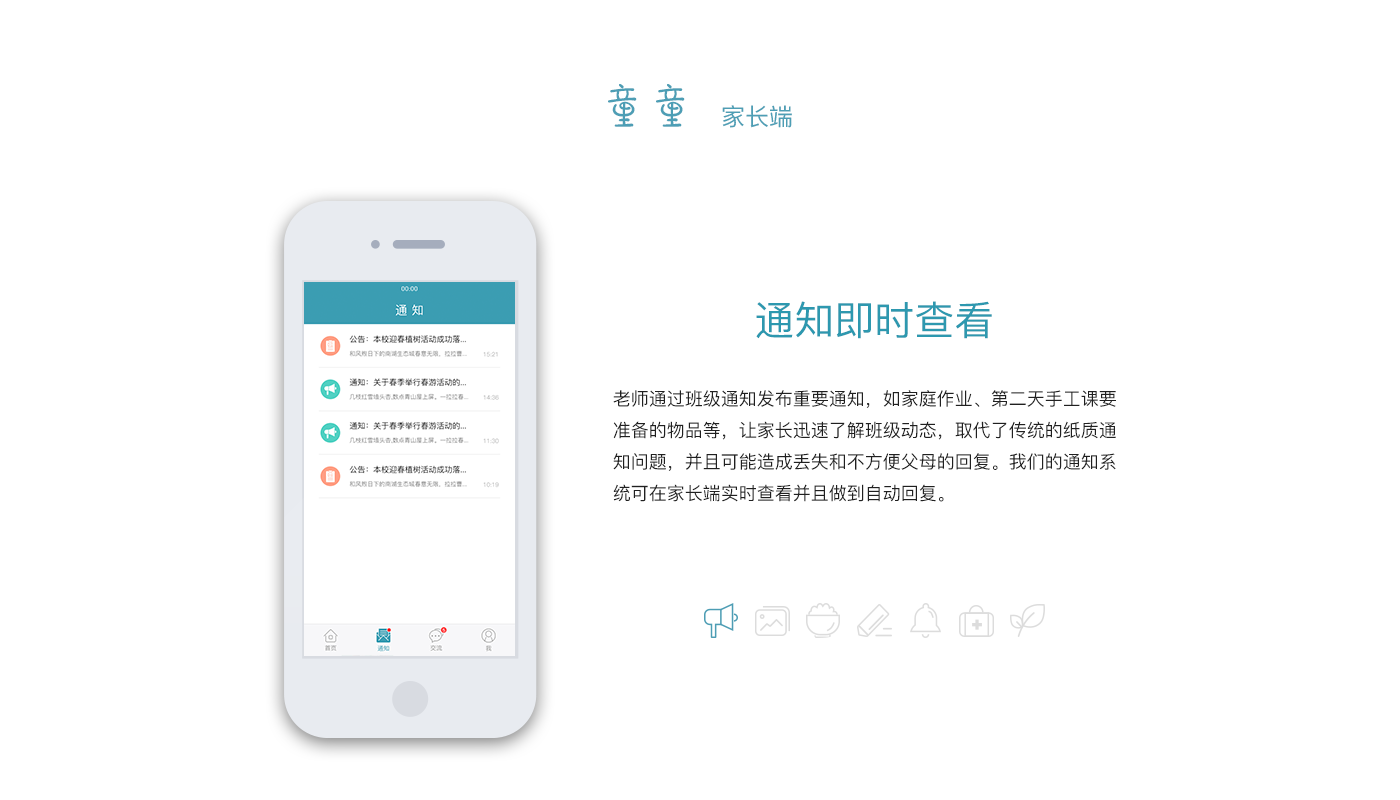
<style>
.page{position:relative;width:1400px;height:800px;background:#ffffff}
.page>*{position:absolute;margin:0}
.t1{font:48px "DFPao-W4-WIN-BF";color:#4d9eb5}
.t2{font:24px "PingFangSC-Regular";color:#4d9eb5}
.t3{font:40px "PingFangSC-Regular";color:#2d98af}
.t4{font:18px "PingFangSC-Regular";color:#202020}
</style>
<div class="page">
<p class="t1" style="left:608px;top:84px;width:77px;height:43px">童童</p>
<p class="t2" style="left:722px;top:105px;width:70px;height:23px">家长端</p>
<p class="t3" style="left:756px;top:301px;width:236px;height:38px">通知即时查看</p>
<p class="t4" style="left:613px;top:390px;width:503px;height:112px">老师通过班级通知发布重要通知，如家庭作业、第二天手工课要<br>准备的物品等，让家长迅速了解班级动态，取代了传统的纸质通<br>知问题，并且可能造成丢失和不方便父母的回复。我们的通知系<br>统可在家长端实时查看并且做到自动回复。</p>
</div>
